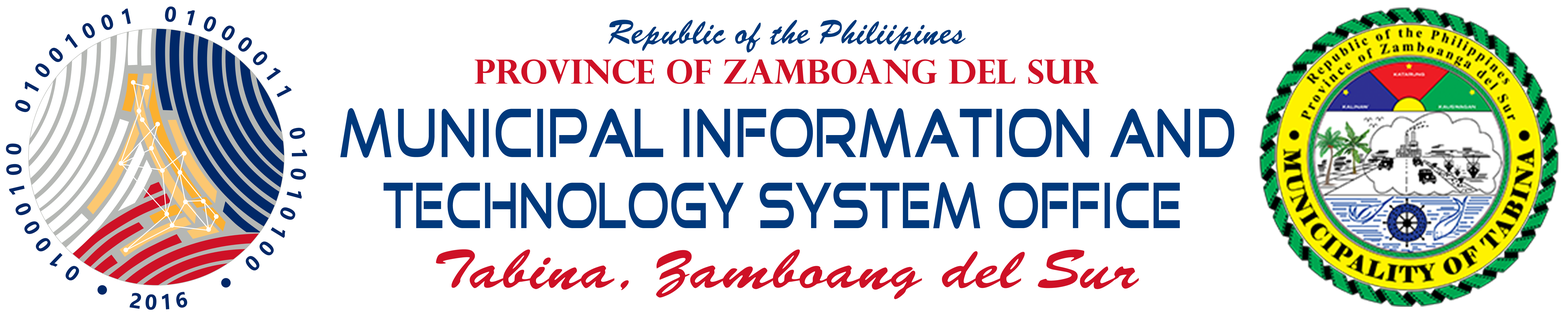
<style>
.page{position:relative;width:1568px;height:314px;background:#ffffff}
.page>*{position:absolute;margin:0}
.t1{font:33.2px "PerpetuaTitlingMT-Bold";color:#ce1126}
.t2{font:33.2px "Signature-Regular";color:#00397c}
.t3{font:66.9px "GoodTimes";color:#00397c;scale:0.69 1}
.t4{font:63px "GoodTimes";color:#00397c;scale:0.67 1}
.t5{font:53.6px "Signature-Regular";color:#ce1126;scale:1.22 1}
</style>
<div class="page">
<p class="t1" style="left:475px;top:20px;width:624px;height:64px;text-align:center"><span class="t2">Republic of the Philiipines<br></span>PROVINCE OF ZAMBOANG DEL SUR</p>
<p class="t3" style="left:340px;top:108px;width:894px;height:50px">MUNICIPAL INFORMATION AND</p>
<p class="t4" style="left:383px;top:182px;width:797px;height:47px">TECHNOLOGY SYSTEM OFFICE</p>
<p class="t5" style="left:436px;top:249px;width:703px;height:50px">Tabina, Zamboang del Sur</p>
</div>
